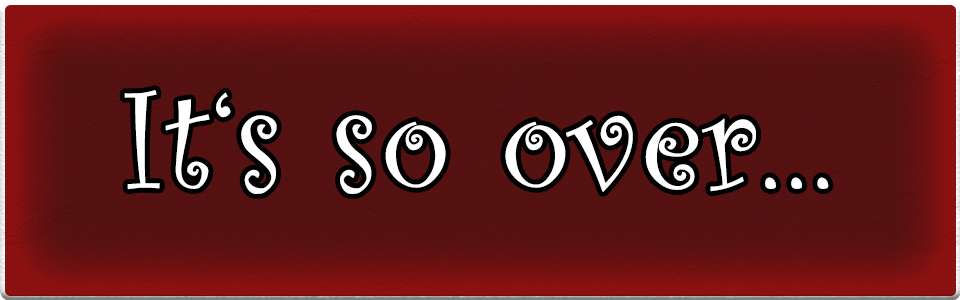
<style>
.page{position:relative;width:960px;height:300px;background:#561111}
.page>*{position:absolute;margin:0}
.t1{font:144px "CurlzMT";color:#ffffff;font-weight:bold}
</style>
<div class="page">
<p class="t1" style="left:124px;top:90px;width:705px;height:104px">It‘s so over...</p>
</div>
